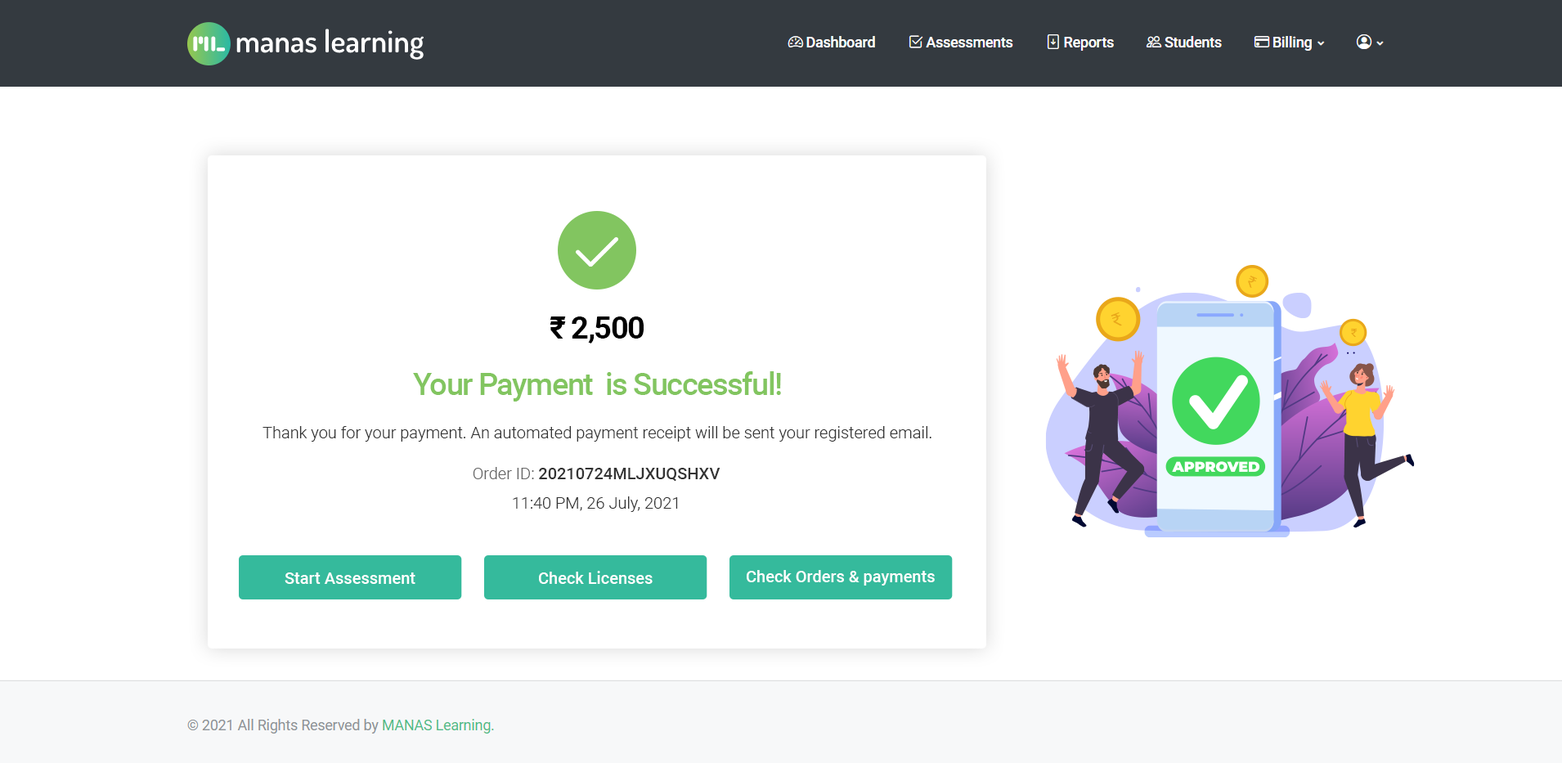
<style>
.page{position:relative;width:1562px;height:763px;background:#ffffff}
.page>*{position:absolute;margin:0}
.t1{font:31.1px "Roboto-Bold";letter-spacing:-0.04em;color:#000000}
.t2{font:31.1px "Roboto-Medium";letter-spacing:-0.04em;color:#82c560}
.t3{font:16.4px "Roboto-Light";color:#333333}
.t4{font:16.4px/29.4px "Roboto-Light";color:#333333}
.t5{font:16.4px/29.4px "Roboto-Light";color:#666666}
.t6{font:16.4px/29.4px "Roboto-Medium";color:#333333}
.t7{font:16.4px "Roboto-Medium";color:#ffffff}
</style>
<div class="page">
<p class="t1" style="left:550px;top:317px;width:94px;height:27px">₹ 2,500</p>
<p class="t2" style="left:413px;top:371px;width:368px;height:31px">Your Payment  is Successful!</p>
<p class="t3" style="left:263px;top:426px;width:669px;height:16px">Thank you for your payment. An automated payment receipt will be sent your registered email.</p>
<p class="t4" style="left:473px;top:467px;width:248px;height:45px;text-align:center"><span class="t5">Order ID: </span><span class="t6">20210724MLJXUQSHXV<br></span>11:40 PM, 26 July, 2021</p>
<p class="t7" style="left:285px;top:573px;width:131px;height:11px">Start Assessment</p>
<p class="t7" style="left:539px;top:571px;width:114px;height:13px">Check Licenses</p>
<p class="t7" style="left:747px;top:570px;width:188px;height:16px">Check Orders &amp; payments</p>
</div>
